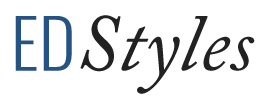
<style>
.page{position:relative;width:264px;height:100px;background:#ffffff}
.page>*{position:absolute;margin:0}
.t1{font:67.9px "Oswald-Light";color:#255484;scale:1.04 1}
.t2{font:80px "ACaslonPro-Italic";color:#222222;scale:1.04 1}
</style>
<div class="page">
<p class="t1" style="left:15px;top:16px;width:57px;height:55px">ED</p>
<p class="t2" style="left:80px;top:15px;width:175px;height:79px">Styles</p>
</div>
